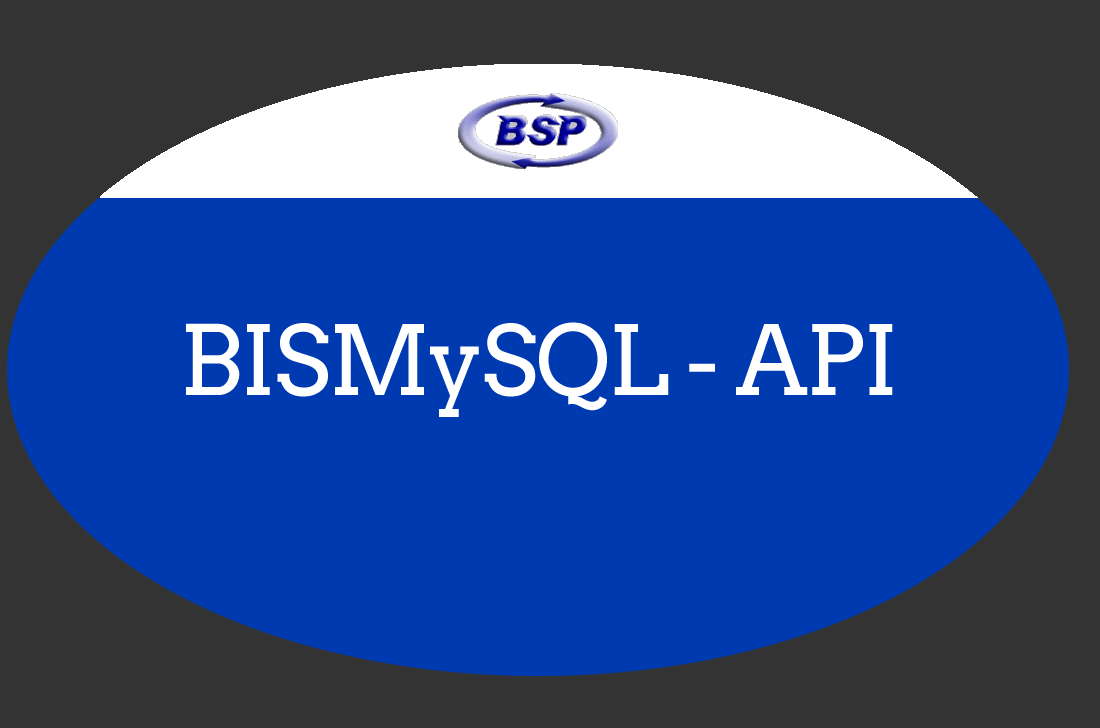
<style>
.page{position:relative;width:1100px;height:728px;background:#003ab0}
.page>*{position:absolute;margin:0}
.t1{font:96px "Arvo";letter-spacing:-0.025em;color:#ffffff}
</style>
<div class="page">
<p class="t1" style="left:186px;top:322px;width:707px;height:95px">BISMySQL - API</p>
</div>
